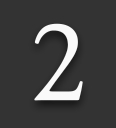
<style>
.page{position:relative;width:116px;height:128px;background:#333333}
.page>*{position:absolute;margin:0}
.t1{font:102px "KoPubWorldBatangMedium";color:#fafafa}
</style>
<div class="page">
<p class="t1" style="left:34px;top:23px;width:49px;height:78px">2</p>
</div>
